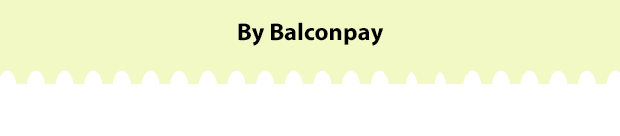
<style>
.page{position:relative;width:620px;height:136px;background:#f3f9c4}
.page>*{position:absolute;margin:0}
.t1{font:24.5px "MyriadPro-Bold";color:#000000}
</style>
<div class="page">
<p class="t1" style="left:238px;top:22px;width:146px;height:24px">By Balconpay</p>
</div>
